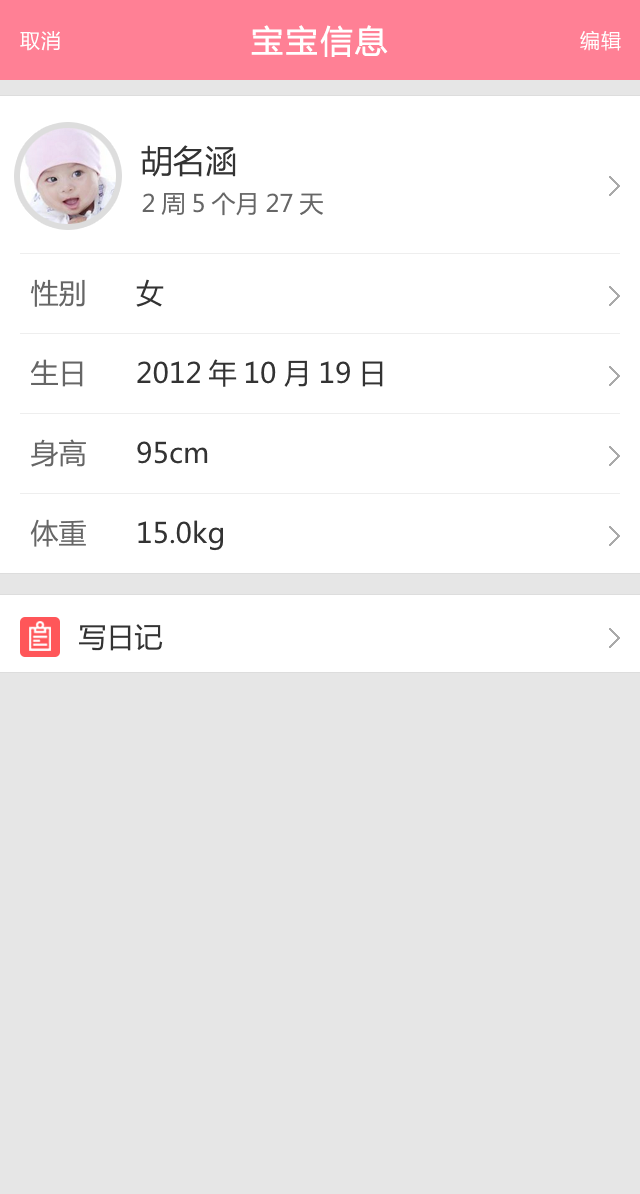
<style>
.page{position:relative;width:640px;height:1194px;background:#e6e6e6}
.page>*{position:absolute;margin:0}
.t1{font:32px "MicrosoftYaHei";letter-spacing:0.05em;color:#ffffff;font-weight:bold}
.t2{font:20px "MicrosoftYaHei";letter-spacing:0.05em;color:#ffffff}
.t3{font:24px/40px "MicrosoftYaHei";color:#666666}
.t4{font:32px/40px "MicrosoftYaHei";color:#333333}
.t5{font:28px/40px "MicrosoftYaHei";color:#333333}
.t6{font:28px/40px "MicrosoftYaHei";color:#666666}
.t7{font:28px "MicrosoftYaHei";color:#333333}
</style>
<div class="page">
<p class="t1" style="left:251px;top:25px;width:137px;height:32px">宝宝信息</p>
<p class="t2" style="left:580px;top:30px;width:41px;height:21px">编辑</p>
<p class="t2" style="left:20px;top:31px;width:40px;height:20px">取消</p>
<p class="t3" style="left:141px;top:145px;width:182px;height:71px"><span class="t4">胡名涵<br></span>2周5个月27天</p>
<p class="t5" style="left:30px;top:279px;width:353px;height:272px"><span class="t6">性别      </span>女 <br><br><span class="t6">生日      </span>2012年10月19日<br><br><span class="t6">身高      </span>95cm<br><br><span class="t6">体重      </span>15.0kg</p>
<p class="t7" style="left:79px;top:624px;width:84px;height:27px">写日记</p>
</div>
